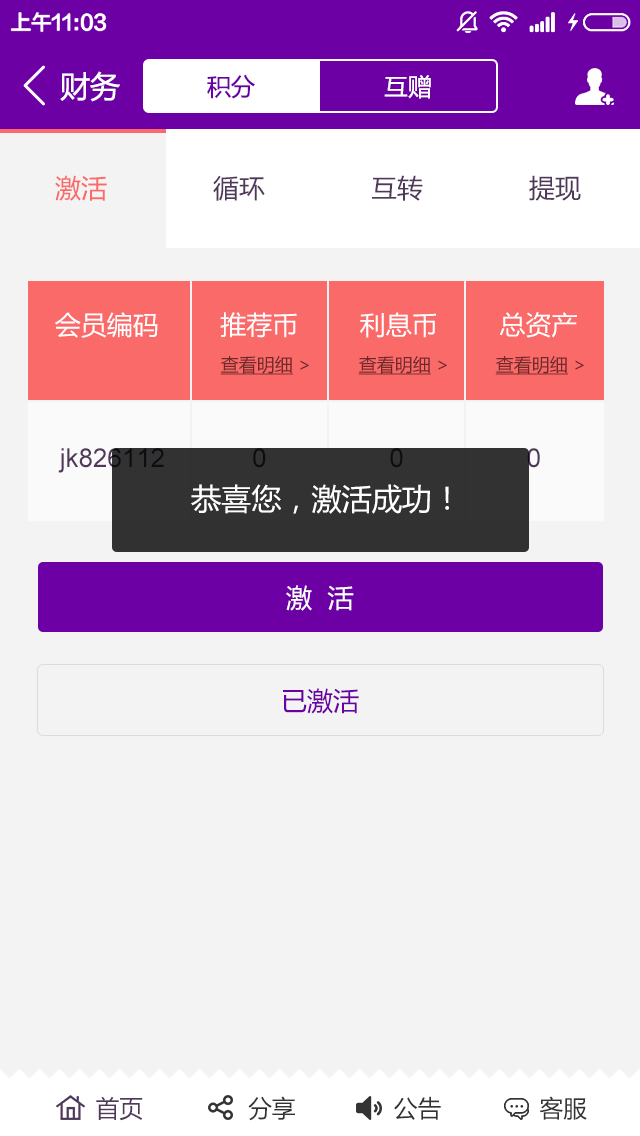
<style>
.page{position:relative;width:640px;height:1136px;background:#f3f3f3}
.page>*{position:absolute;margin:0}
.t1{font:30px "MicrosoftYaHei";color:#ffffff}
.t2{font:24px "MicrosoftYaHei";color:#6d00a5}
.t3{font:24px "MicrosoftYaHei";color:#ffffff}
.t4{font:26px "MicrosoftYaHei";color:#f96a69}
.t5{font:26px "MicrosoftYaHei";color:#50385b}
.t6{font:26px "MicrosoftYaHei";color:#ffffff}
.t7{font:18px "MicrosoftYaHei";color:#6f2928;text-decoration:underline}
.t8{font:18px "MicrosoftYaHei";color:#6f2928}
.t9{font:26px "MicrosoftYaHei";color:#6d00a5}
.t10{font:24px "MicrosoftYaHei";color:#333333}
.t11{font:24px "MicrosoftYaHei";color:#50385b}
</style>
<div class="page">
<p class="t1" style="left:60px;top:71px;width:60px;height:31px">财务</p>
<p class="t2" style="left:207px;top:74px;width:48px;height:25px">积分</p>
<p class="t3" style="left:384px;top:75px;width:47px;height:24px">互赠</p>
<p class="t4" style="left:55px;top:175px;width:52px;height:26px">激活</p>
<p class="t5" style="left:213px;top:175px;width:52px;height:26px">循环</p>
<p class="t5" style="left:372px;top:175px;width:51px;height:26px">互转</p>
<p class="t5" style="left:529px;top:175px;width:52px;height:26px">提现</p>
<p class="t6" style="left:55px;top:312px;width:522px;height:26px">会员编码        推荐币        利息币        总资产</p>
<p class="t7" style="left:220px;top:356px;width:89px;height:19px">查看明细<span class="t8"> &gt;</span></p>
<p class="t7" style="left:358px;top:356px;width:89px;height:19px">查看明细<span class="t8"> &gt;</span></p>
<p class="t7" style="left:495px;top:356px;width:89px;height:19px">查看明细<span class="t8"> &gt;</span></p>
<p class="t1" style="left:191px;top:484px;width:258px;height:30px">恭喜您，激活成功！</p>
<p class="t6" style="left:286px;top:585px;width:68px;height:26px">激  活</p>
<p class="t9" style="left:283px;top:688px;width:76px;height:26px">已激活</p>
<p class="t10" style="left:96px;top:1096px;width:491px;height:25px"><span class="t11">首页</span>               分享              公告              客服</p>
</div>
